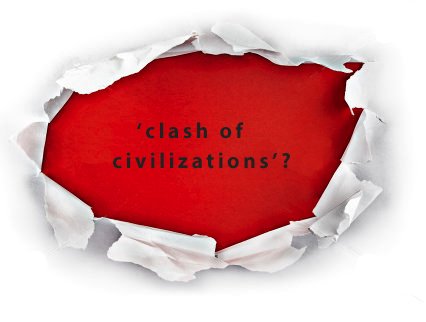
<style>
.page{position:relative;width:426px;height:322px;background:#ffffff}
.page>*{position:absolute;margin:0}
.t1{font:22px "MyriadPro-Bold";letter-spacing:0.15em;color:#212121}
</style>
<div class="page">
<p class="t1" style="left:136px;top:122px;width:108px;height:17px">‘clash of</p>
<p class="t1" style="left:113px;top:152px;width:177px;height:17px">civilizations’?</p>
</div>
